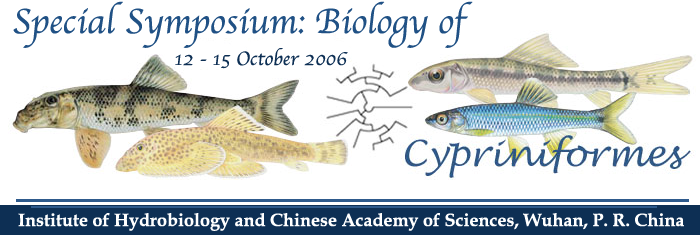
<style>
.page{position:relative;width:700px;height:235px;background:#ffffff}
.page>*{position:absolute;margin:0}
.t1{font:36px "Apple-Chancery";color:#205185}
.t2{font:20px "Apple-Chancery";color:#0d2f54}
.t3{font:18px "BookAntiqua-Bold";color:#ffffff}
</style>
<div class="page">
<p class="t1" style="left:12px;top:2px;width:462px;height:59px">Special Symposium: Biology of</p>
<p class="t2" style="left:175px;top:48px;width:173px;height:21px">12 - 15 October 2006</p>
<p class="t3" style="left:18px;top:213px;width:666px;height:18px">Institute of Hydrobiology and Chinese Academy of Sciences, Wuhan, P. R. China</p>
</div>
